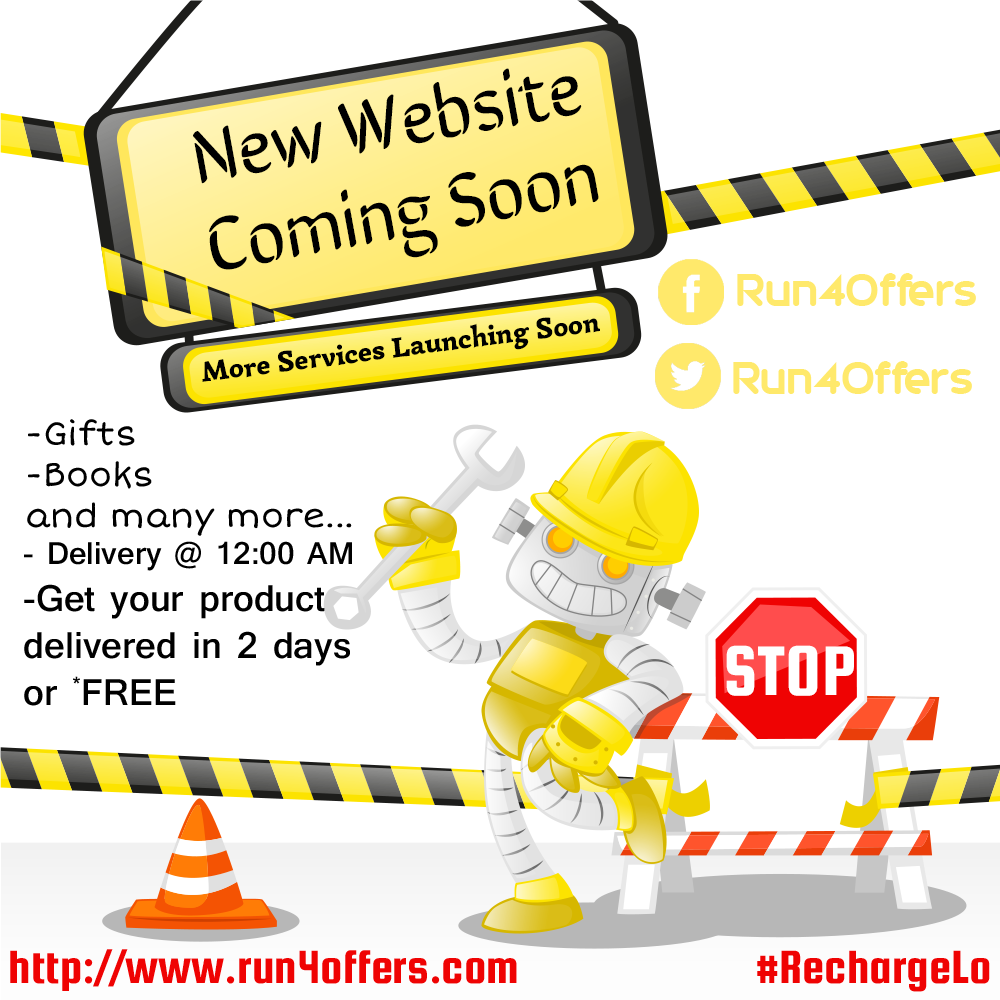
<style>
.page{position:relative;width:1000px;height:1000px;background:#ffffff}
.page>*{position:absolute;margin:0}
.t1{font:75px "SirinStencil-Regular";color:#000000}
.t2{font:53.8px "20thCenturyFont";letter-spacing:-0.025em;color:#ffe96b}
.t3{font:29px "Simonetta-Black";color:#000000}
.t4{font:34px "ShortStack";color:#000000}
.t5{font:39px "Shruti-Bold";color:#000000}
.t6{font:33px "Shruti-Bold";color:#000000}
.t7{font:75px "SquadaOne-Regular";color:#ffffff}
.t8{font:50px "SquadaOne-Regular";color:#ef0303}
</style>
<div class="page">
<p class="t1" style="left:193px;top:68px;width:406px;height:202px;text-align:center;rotate:-10deg">New Website<br>Coming Soon</p>
<p class="t2" style="left:737px;top:273px;width:239px;height:33px">Run4Offers</p>
<p class="t3" style="left:202px;top:317px;width:398px;height:65px;rotate:-7deg">More Services Launching Soon</p>
<p class="t2" style="left:733px;top:361px;width:239px;height:33px">Run4Offers</p>
<p class="t4" style="left:27px;top:419px;width:325px;height:117px;text-align:right">Gifts-<br>Books-<br>...and many more</p>
<p class="t5" style="left:24px;top:541px;width:328px;height:165px;text-align:right"><span class="t6">Delivery @ 12:00 AM - <br></span>Get your product-<br>delivered in 2 days or *FREE</p>
<p class="t7" style="left:726px;top:645px;width:128px;height:51px">STOP</p>
<p class="t8" style="left:10px;top:949px;width:507px;height:42px">http://www.run4offers.com</p>
<p class="t8" style="left:757px;top:950px;width:233px;height:42px">RechargeLo#</p>
</div>
